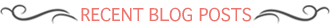
<style>
.page{position:relative;width:330px;height:27px;background:#ffffff}
.page>*{position:absolute;margin:0}
.t1{font:17px "Thonburi";letter-spacing:-0.005em;color:#ef746e}
</style>
<div class="page">
<p class="t1" style="left:81px;top:7px;width:171px;height:15px">RECENT BLOG POSTS</p>
</div>
